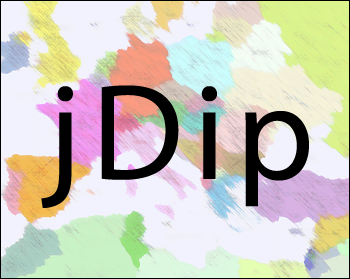
<style>
.page{position:relative;width:350px;height:279px}
.page>*{position:absolute;margin:0}
.t1{font:137.5px "MyriadPro-Regular";letter-spacing:0.075em;color:#000000}
</style>
<div class="page">
<p class="t1" style="left:41px;top:85px;width:268px;height:123px">jDip</p>
</div>
